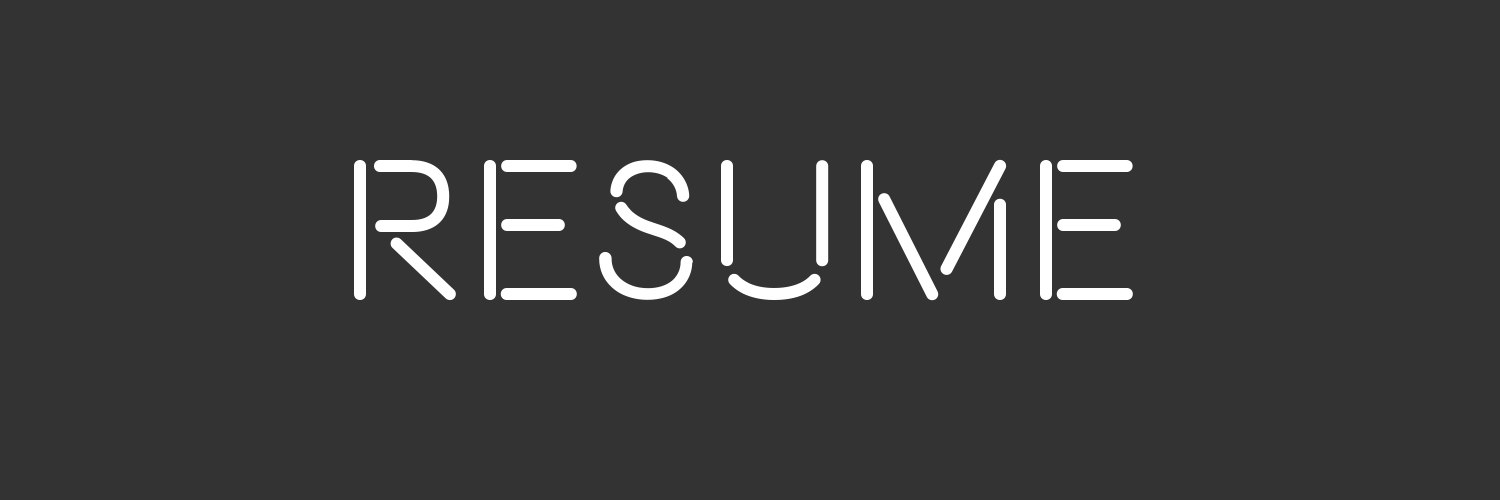
<style>
.page{position:relative;width:1500px;height:500px;background:#333333}
.page>*{position:absolute;margin:0}
.t1{font:200px "Beon-Medium";color:#ffffff}
</style>
<div class="page">
<p class="t1" style="left:354px;top:159px;width:779px;height:142px">Resume</p>
</div>
